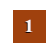
<style>
.page{position:relative;width:55px;height:54px;background:#ffffff}
.page>*{position:absolute;margin:0}
.t1{font:18px "TimesNewRomanPS-BoldMT"}
.t2{font:18px "TimesNewRomanPS-BoldMT";color:#faf4f4}
</style>
<div class="page">
<p class="t1" style="left:24px;top:20px;width:8px;height:13px">1</p>
<p class="t2" style="left:25px;top:19px;width:8px;height:13px">1</p>
</div>
